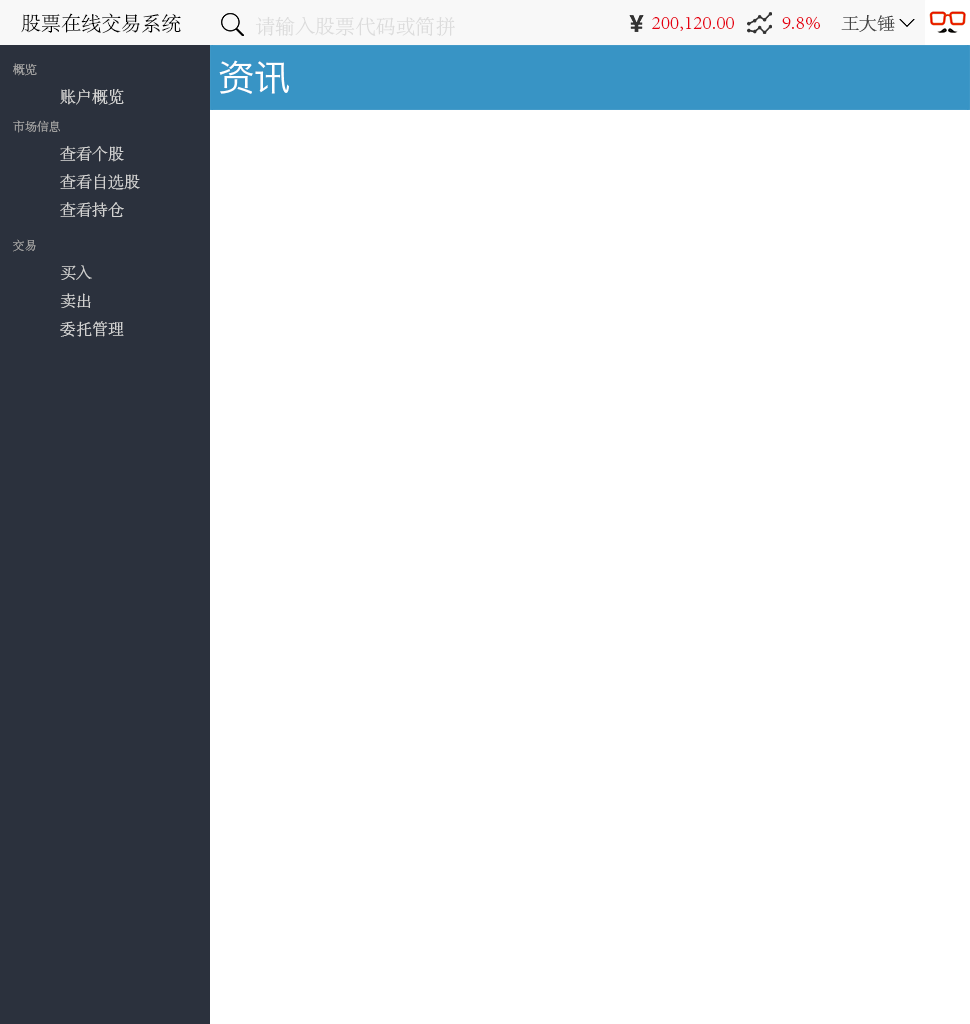
<style>
.page{position:relative;width:970px;height:1024px;background:#ffffff}
.page>*{position:absolute;margin:0}
.t1{font:20px "AdobeSongStd-Light";color:#000000}
.t2{font:20px "AdobeSongStd-Light";color:#dcdcdc}
.t3{font:20px "AdobeSongStd-Light";color:#e60012}
.t4{font:18px "AdobeSongStd-Light";color:#434343}
.t5{font:12px "AdobeSongStd-Light";color:#a0a0a0}
.t6{font:36px "HiraginoSansGB-W3";color:#ffffff}
.t7{font:16px "AdobeSongStd-Light";color:#d2d2d2}
</style>
<div class="page">
<p class="t1" style="left:21px;top:13px;width:160px;height:21px">股票在线交易系统</p>
<p class="t2" style="left:255px;top:16px;width:200px;height:21px">请输入股票代码或简拼</p>
<p class="t3" style="left:652px;top:17px;width:82px;height:14px">200,120.00</p>
<p class="t3" style="left:782px;top:16px;width:38px;height:14px">9.8%</p>
<p class="t4" style="left:841px;top:15px;width:54px;height:17px">王大锤</p>
<p class="t5" style="left:13px;top:63px;width:24px;height:13px">概览</p>
<p class="t6" style="left:219px;top:60px;width:70px;height:34px">资讯</p>
<p class="t7" style="left:60px;top:89px;width:64px;height:16px">账户概览</p>
<p class="t5" style="left:13px;top:120px;width:47px;height:13px">市场信息</p>
<p class="t7" style="left:60px;top:146px;width:64px;height:16px">查看个股</p>
<p class="t7" style="left:60px;top:174px;width:80px;height:16px">查看自选股</p>
<p class="t7" style="left:60px;top:202px;width:64px;height:15px">查看持仓</p>
<p class="t5" style="left:13px;top:239px;width:23px;height:13px">交易</p>
<p class="t7" style="left:60px;top:265px;width:32px;height:15px">买入</p>
<p class="t7" style="left:60px;top:293px;width:31px;height:15px">卖出</p>
<p class="t7" style="left:60px;top:321px;width:64px;height:16px">委托管理</p>
</div>
